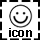
<style>
.page{position:relative;width:40px;height:40px;background:#ffffff}
.page>*{position:absolute;margin:0}
.t1{font:12.2px "Arial-BoldMT";color:#000000}
</style>
<div class="page">
<p class="t1" style="left:9px;top:28px;width:23px;height:9px">icon</p>
</div>
